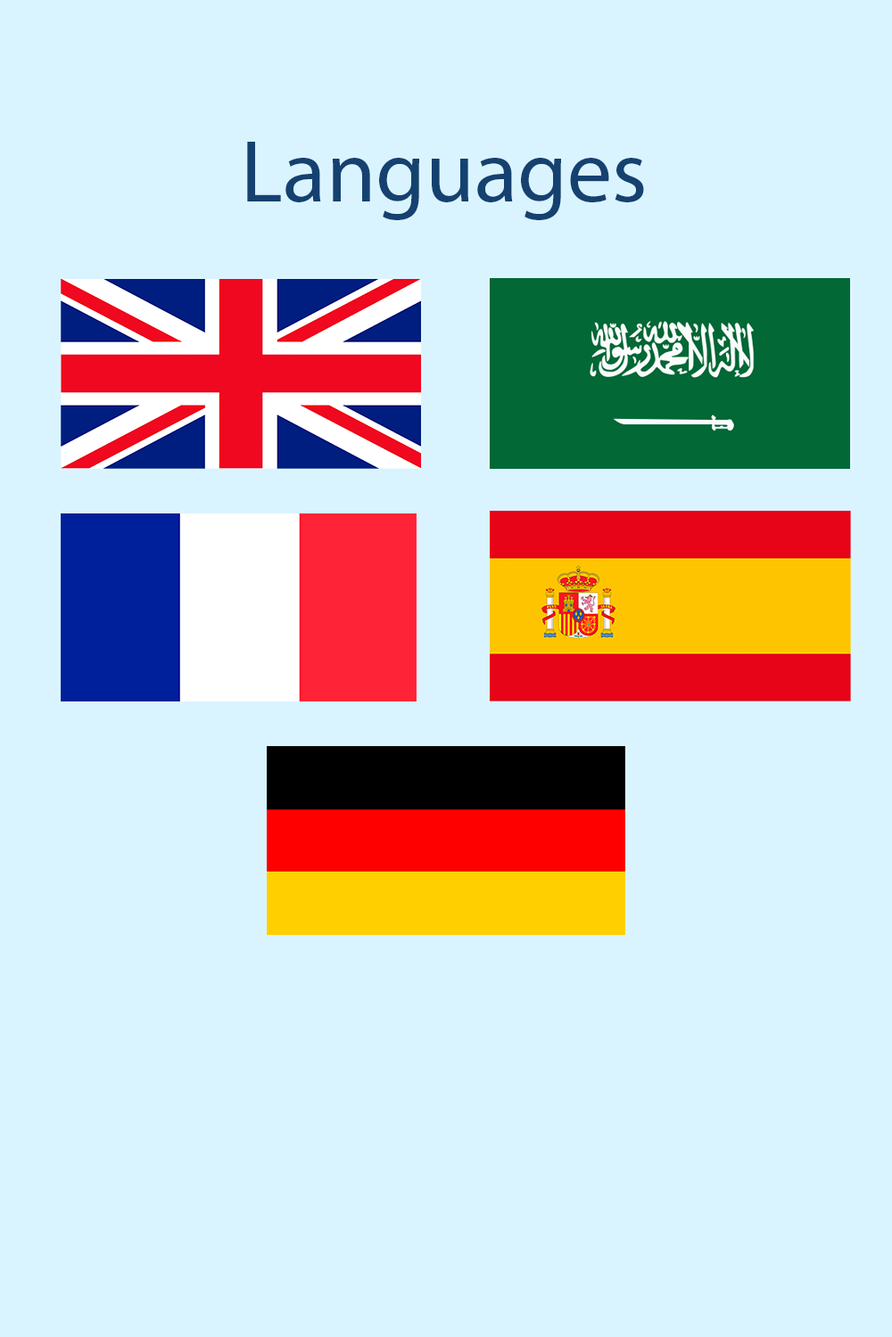
<style>
.page{position:relative;width:892px;height:1337px;background:#daf4ff}
.page>*{position:absolute;margin:0}
.t1{font:89.2px "MyriadPro-Regular";color:#154170}
</style>
<div class="page">
<p class="t1" style="left:247px;top:142px;width:397px;height:78px">Languages</p>
</div>
